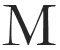
<style>
.page{position:relative;width:60px;height:50px;background:#ffffff}
.page>*{position:absolute;margin:0}
.t1{font:65px "Garamond";color:#262626}
</style>
<div class="page">
<p class="t1" style="left:2px;top:5px;width:54px;height:40px">M</p>
</div>
